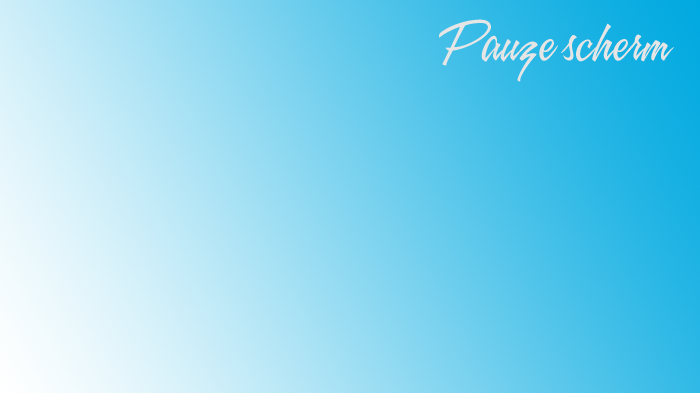
<style>
.page{position:relative;width:700px;height:393px}
.page>*{position:absolute;margin:0}
.t1{font:53px "A&S-Speedway";color:#e5e5e5}
</style>
<div class="page">
<p class="t1" style="left:439px;top:19px;width:235px;height:63px">Pauze scherm</p>
</div>
